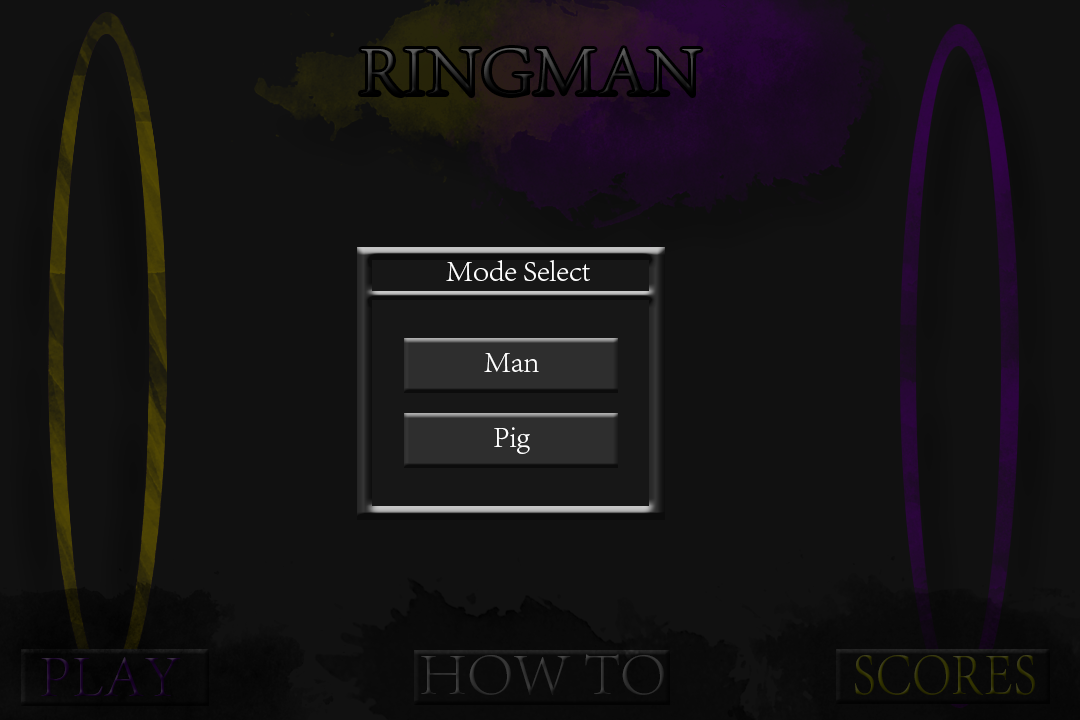
<style>
.page{position:relative;width:1080px;height:720px;background:#111111}
.page>*{position:absolute;margin:0}
.t1{font:72px "AdobeSongStd-Light"}
.t2{font:30px "AdobeSongStd-Light";color:#ffffff}
.t3{font:60px "AdobeSongStd-Light";color:#303030}
.t4{font:60px "AdobeSongStd-Light";color:#180128}
.t5{font:60px "AdobeSongStd-Light";color:#313100;scale:0.86 1}
</style>
<div class="page">
<p class="t1" style="left:361px;top:48px;width:340px;height:47px">RINGMAN</p>
<p class="t2" style="left:446px;top:260px;width:144px;height:21px">Mode Select</p>
<p class="t2" style="left:484px;top:353px;width:55px;height:19px">Man</p>
<p class="t2" style="left:494px;top:427px;width:36px;height:27px">Pig</p>
<p class="t3" style="left:421px;top:654px;width:243px;height:41px">HOW TO</p>
<p class="t4" style="left:41px;top:657px;width:140px;height:39px">PLAY</p>
<p class="t5" style="left:855px;top:655px;width:180px;height:40px">SCORES</p>
</div>
